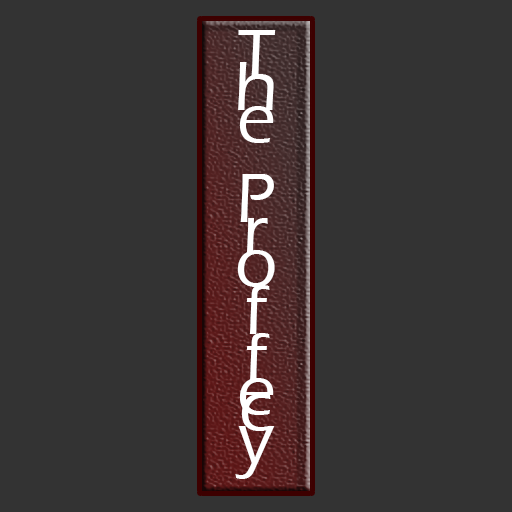
<style>
.page{position:relative;width:512px;height:512px;background:#333333}
.page>*{position:absolute;margin:0}
.t1{font:72px/16px "ErasITC-Medium";color:#ffffff}
</style>
<div class="page">
<p class="t1" style="left:235px;top:30px;width:41px;height:449px;text-align:center">T<br><br>h<br><br>e<br><br><br><br><br>P<br><br>r<br><br>o<br><br><br>f<br><br><br>f<br><br>e<br>c<br><br>y</p>
</div>
